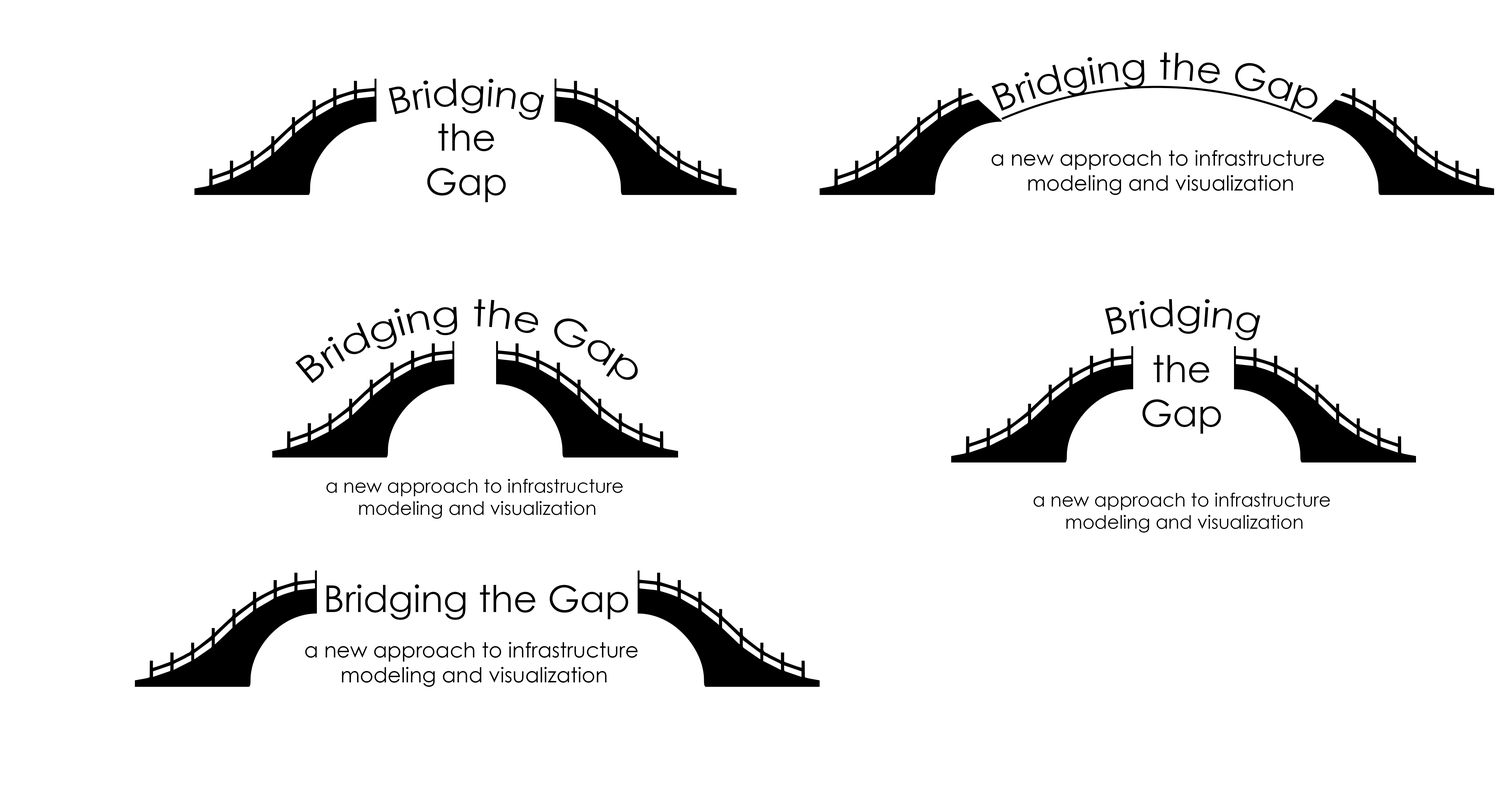
<style>
.page{position:relative;width:1511px;height:789px;background:#ffffff}
.page>*{position:absolute;margin:0}
.t1{font:36.9px "CenturyGothic";color:#000000;text-decoration:underline}
.t2{font:36.9px "CenturyGothic";color:#000000}
.t3{font:20.8px "CenturyGothic";color:#000000}
.t4{font:18.5px "CenturyGothic";color:#000000}
</style>
<div class="page">
<p class="t1" style="left:991px;top:52px;width:327px;height:68px">Bridging the Gap</p>
<p class="t2" style="left:389px;top:78px;width:155px;height:42px">Bridging</p>
<p class="t2" style="left:427px;top:124px;width:79px;height:78px;text-align:center">the<br>Gap</p>
<p class="t3" style="left:991px;top:150px;width:333px;height:45px;text-align:center">a new approach to infrastructure <br>modeling and visualization</p>
<p class="t2" style="left:295px;top:299px;width:343px;height:84px">Bridging the Gap</p>
<p class="t2" style="left:1105px;top:299px;width:155px;height:41px">Bridging</p>
<p class="t2" style="left:1142px;top:355px;width:79px;height:79px;text-align:center">the<br>Gap</p>
<p class="t4" style="left:326px;top:479px;width:297px;height:40px;text-align:center">a new approach to infrastructure <br>modeling and visualization</p>
<p class="t4" style="left:1033px;top:493px;width:297px;height:40px;text-align:center">a new approach to infrastructure <br>modeling and visualization</p>
<p class="t2" style="left:326px;top:584px;width:302px;height:36px">Bridging the Gap</p>
<p class="t3" style="left:305px;top:642px;width:333px;height:45px;text-align:center">a new approach to infrastructure <br>modeling and visualization</p>
</div>
